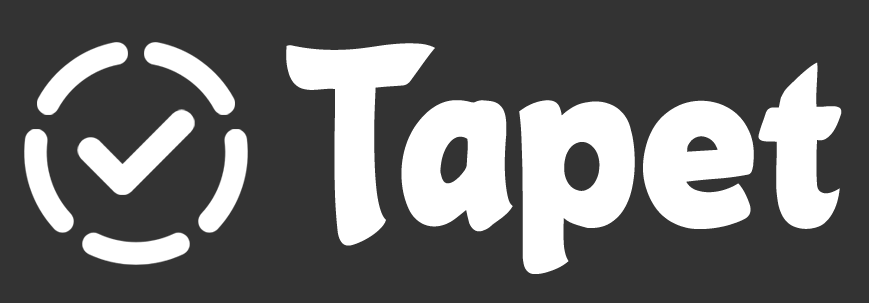
<style>
.page{position:relative;width:869px;height:303px;background:#333333}
.page>*{position:absolute;margin:0}
.t1{font:240px "ChristopherDone";color:#ffffff}
</style>
<div class="page">
<p class="t1" style="left:286px;top:43px;width:556px;height:231px">Tapet</p>
</div>
